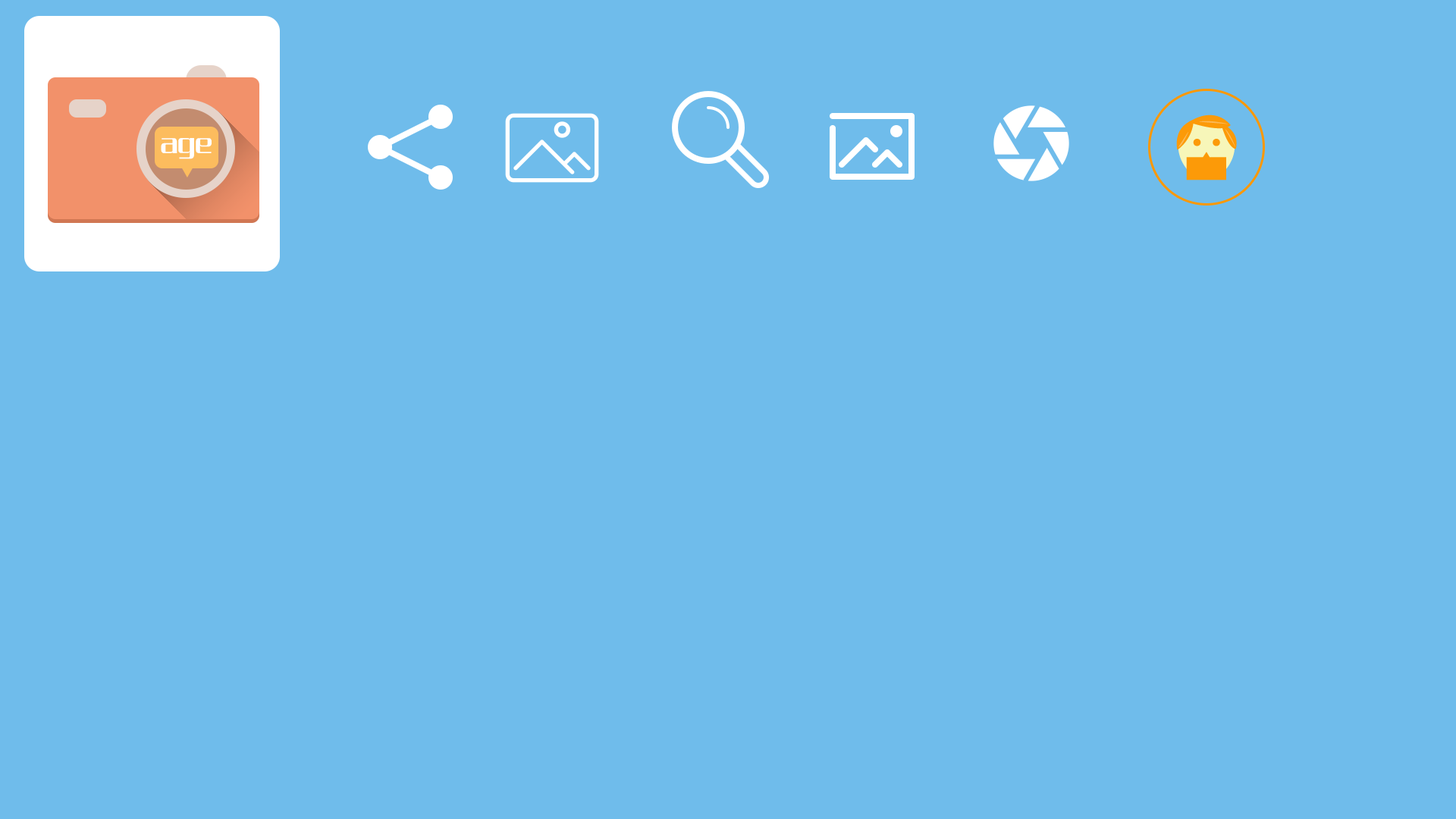
<style>
.page{position:relative;width:1456px;height:819px;background:#6fbceb}
.page>*{position:absolute;margin:0}
.t1{font:31.8px "FZCQK--GBK1-0";color:#ffffff;scale:0.88 1}
</style>
<div class="page">
<p class="t1" style="left:161px;top:138px;width:51px;height:21px">age</p>
</div>
